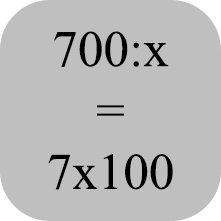
<style>
.page{position:relative;width:221px;height:221px;background:#bfbfbf}
.page>*{position:absolute;margin:0}
.t1{font:51.1px "TimesNewRomanPSMT";color:#000000}
</style>
<div class="page">
<p class="t1" style="left:48px;top:31px;width:125px;height:159px;text-align:center">700:x<br>=<br>7x100</p>
</div>
